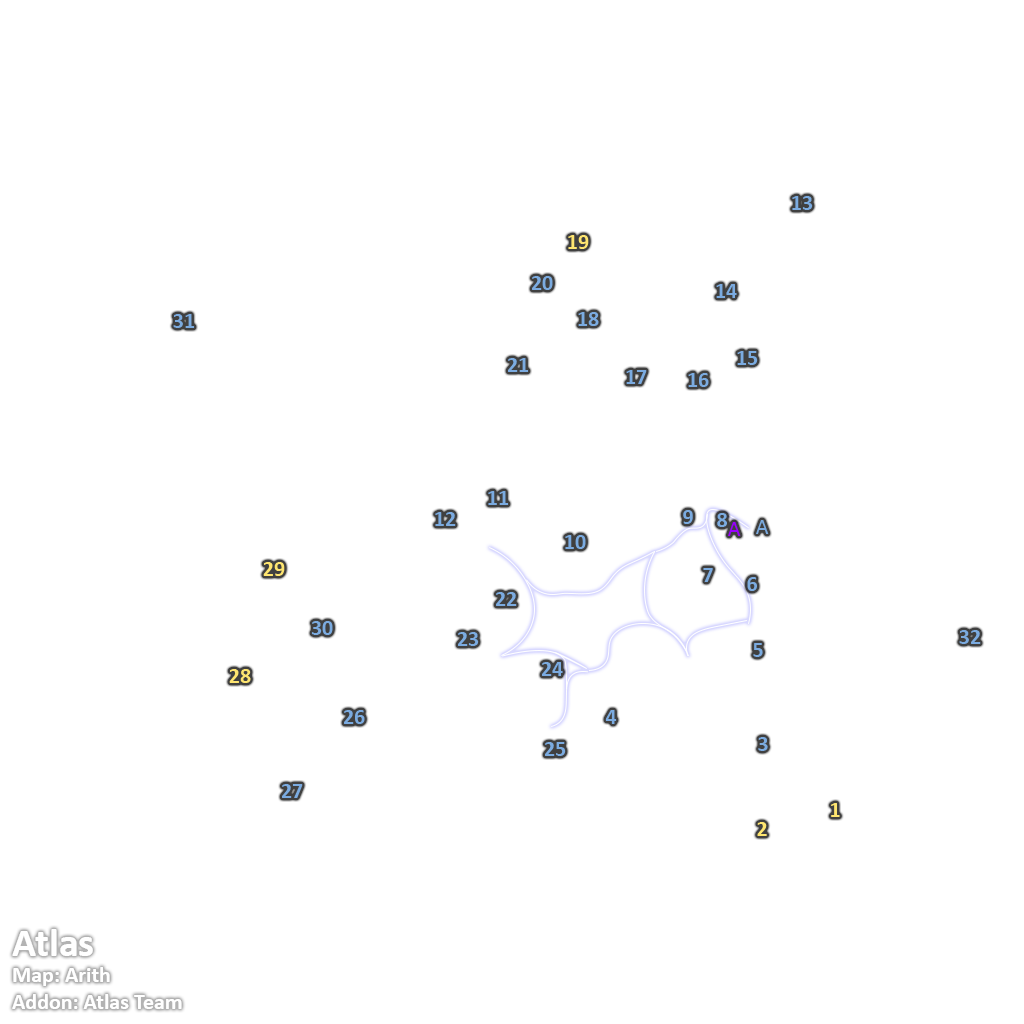
<style>
.page{position:relative;width:1024px;height:1024px;background:#ffffff}
.page>*{position:absolute;margin:0}
.t1{font:22px "Calibri-Bold";color:#7babe0}
.t2{font:22px "Calibri-Bold";color:#fee570}
.t3{font:22px "Calibri";color:#7babe0}
.t4{font:22px "Calibri";color:#9900ff}
</style>
<div class="page">
<p class="t1" style="left:792px;top:196px;width:21px;height:14px">13</p>
<p class="t2" style="left:568px;top:235px;width:21px;height:14px">19</p>
<p class="t1" style="left:532px;top:276px;width:21px;height:14px">20</p>
<p class="t1" style="left:716px;top:284px;width:21px;height:14px">14</p>
<p class="t1" style="left:173px;top:314px;width:22px;height:14px">31</p>
<p class="t1" style="left:578px;top:312px;width:21px;height:14px">18</p>
<p class="t1" style="left:737px;top:351px;width:21px;height:14px">15</p>
<p class="t1" style="left:508px;top:358px;width:21px;height:14px">21</p>
<p class="t1" style="left:626px;top:370px;width:21px;height:14px">17</p>
<p class="t1" style="left:688px;top:373px;width:21px;height:14px">16</p>
<p class="t1" style="left:488px;top:491px;width:21px;height:14px">11</p>
<p class="t1" style="left:683px;top:510px;width:10px;height:14px">9</p>
<p class="t1" style="left:435px;top:512px;width:21px;height:14px">12</p>
<p class="t1" style="left:717px;top:513px;width:10px;height:14px">8</p>
<p class="t3" style="left:756px;top:520px;width:13px;height:14px">A</p>
<p class="t4" style="left:728px;top:522px;width:13px;height:14px">A</p>
<p class="t1" style="left:565px;top:535px;width:21px;height:14px">10</p>
<p class="t2" style="left:263px;top:562px;width:22px;height:14px">29</p>
<p class="t1" style="left:703px;top:568px;width:10px;height:14px">7</p>
<p class="t1" style="left:747px;top:577px;width:10px;height:14px">6</p>
<p class="t1" style="left:496px;top:592px;width:21px;height:14px">22</p>
<p class="t1" style="left:311px;top:621px;width:22px;height:14px">30</p>
<p class="t1" style="left:959px;top:630px;width:22px;height:14px">32</p>
<p class="t1" style="left:458px;top:632px;width:21px;height:14px">23</p>
<p class="t1" style="left:753px;top:643px;width:10px;height:14px">5</p>
<p class="t1" style="left:542px;top:662px;width:21px;height:14px">24</p>
<p class="t2" style="left:229px;top:669px;width:22px;height:14px">28</p>
<p class="t1" style="left:344px;top:710px;width:21px;height:14px">26</p>
<p class="t1" style="left:605px;top:710px;width:12px;height:14px">4</p>
<p class="t1" style="left:758px;top:737px;width:10px;height:14px">3</p>
<p class="t1" style="left:545px;top:742px;width:21px;height:14px">25</p>
<p class="t1" style="left:282px;top:784px;width:21px;height:14px">27</p>
<p class="t2" style="left:831px;top:803px;width:9px;height:14px">1</p>
<p class="t2" style="left:757px;top:822px;width:10px;height:14px">2</p>
</div>
